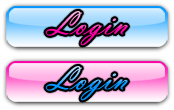
<style>
.page{position:relative;width:174px;height:110px}
.page>*{position:absolute;margin:0}
.t1{font:36px "VladimirScript";letter-spacing:0.032em}
</style>
<div class="page">
<p class="t1" style="left:45px;top:11px;width:83px;height:35px">Login</p>
<p class="t1" style="left:45px;top:66px;width:83px;height:35px">Login</p>
</div>
